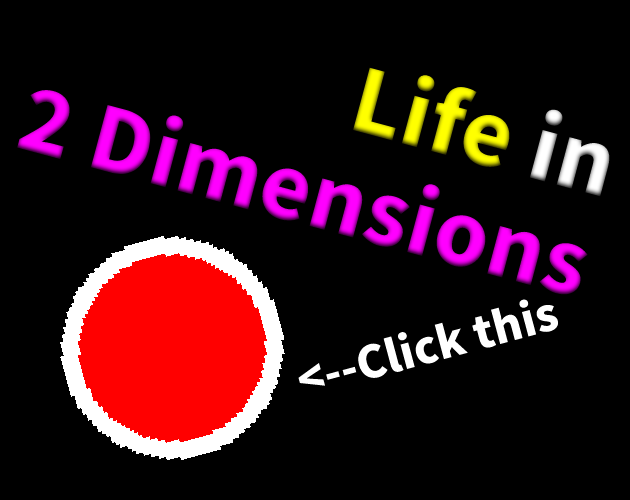
<style>
.page{position:relative;width:630px;height:500px;background:#000000}
.page>*{position:absolute;margin:0}
.t1{font:86.5px "NotoSansTC-Black"}
.t2{font:44.5px "NotoSansTC-Black";color:#ffffff}
</style>
<div class="page">
<p class="t1" style="left:17px;top:67px;width:593px;height:228px;text-align:right;rotate:15deg">Life in<br>2 Dimensions</p>
<p class="t2" style="left:298px;top:299px;width:260px;height:87px;rotate:-15deg">&lt;--Click this</p>
</div>
